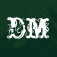
<style>
.page{position:relative;width:57px;height:57px;background:#092e20}
.page>*{position:absolute;margin:0}
.t1{font:30px "Nasty";color:#ffffff}
</style>
<div class="page">
<p class="t1" style="left:6px;top:15px;width:43px;height:24px">dm</p>
</div>
